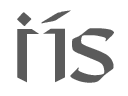
<style>
.page{position:relative;width:128px;height:96px;background:#ffffff}
.page>*{position:absolute;margin:0}
.t1{font:72px "Viking-Normal";color:#5b5b5b}
</style>
<div class="page">
<p class="t1" style="left:17px;top:10px;width:97px;height:73px">Iís</p>
</div>
